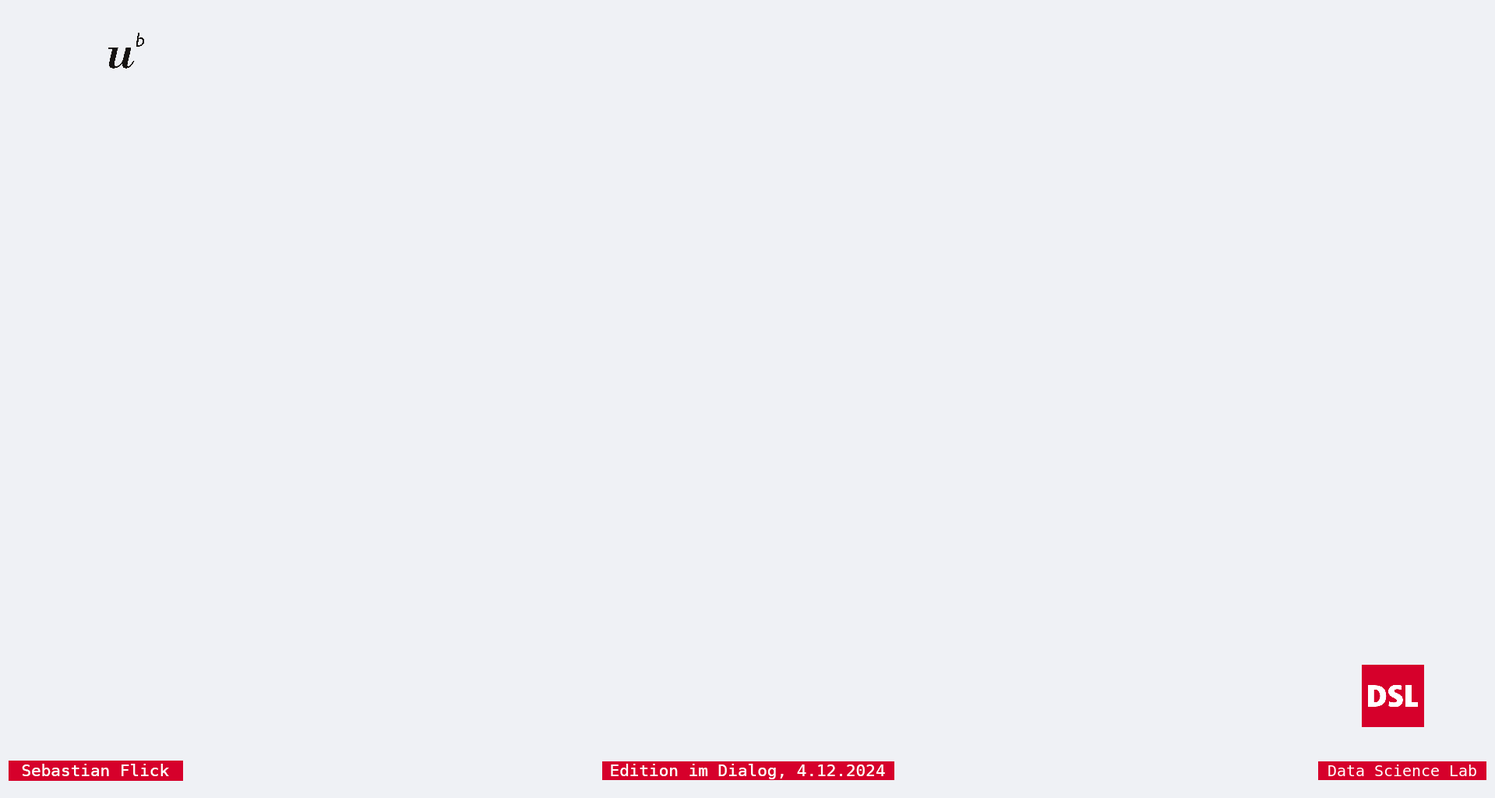
<style>
.page{position:relative;width:1495px;height:798px;background:#eff1f5}
.page>*{position:absolute;margin:0}
.t1{font:16.4px "DejaVuSansMono";color:#ffffff}
</style>
<div class="page">
<p class="t1" style="left:22px;top:763px;width:147px;height:13px">Sebastian Flick</p>
<p class="t1" style="left:611px;top:763px;width:274px;height:16px">Edition im Dialog, 4.12.2024</p>
</div>
